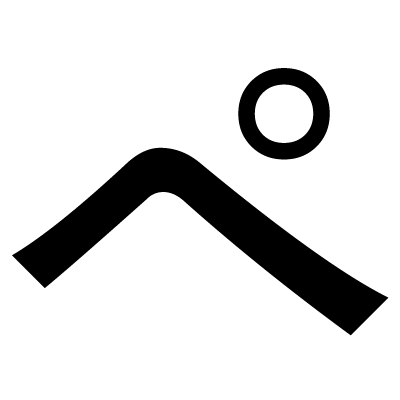
<style>
.page{position:relative;width:400px;height:400px;background:#ffffff}
.page>*{position:absolute;margin:0}
.t1{font:416.7px "MS-PGothic";color:#000000}
</style>
<div class="page">
<p class="t1" style="left:12px;top:68px;width:377px;height:268px">ぺ</p>
</div>
